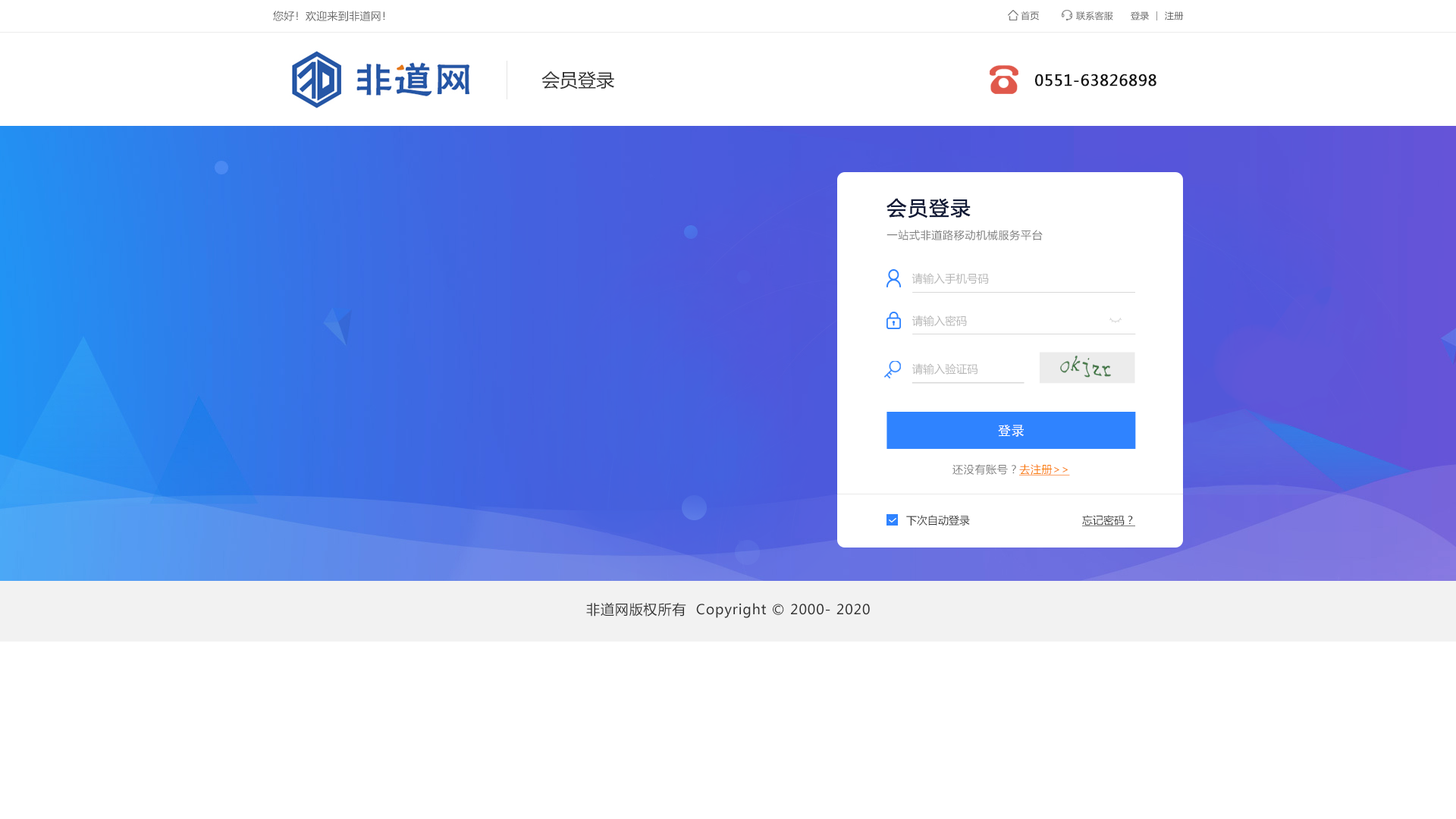
<style>
.page{position:relative;width:1456px;height:819px;background:#ffffff}
.page>*{position:absolute;margin:0}
.t1{font:10.6px "MicrosoftYaHei";letter-spacing:0.022em;color:#666666}
.t2{font:9.1px "MicrosoftYaHei";letter-spacing:0.022em;color:#666666}
.t3{font:18.2px "MicrosoftYaHei";color:#333333}
.t4{font:15.2px "MicrosoftYaHei";letter-spacing:0.022em;color:#121212;font-weight:bold}
.t5{font:19.8px "MicrosoftYaHei";letter-spacing:0.05em;color:#101936;text-transform:uppercase;font-weight:bold}
.t6{font:10.6px "MicrosoftYaHei";letter-spacing:0.05em;color:#7f7f7f}
.t7{font:11px "MicrosoftYaHei";color:#b8b8b8}
.t8{font:13.5px "AdobeHeitiStd-Regular";color:#ffffff}
.t9{font:10.6px "MicrosoftYaHei";letter-spacing:0.05em;color:#f97b03;text-decoration:underline}
.t10{font:10.6px "MicrosoftYaHei";color:#333333}
.t11{font:10.6px "MicrosoftYaHei";color:#333333;text-decoration:underline}
.t12{font:13.6px "MicrosoftYaHei";letter-spacing:0.05em;color:#333333}
</style>
<div class="page">
<p class="t1" style="left:273px;top:11px;width:112px;height:10px">您好！欢迎来到非道网！</p>
<p class="t2" style="left:1021px;top:11px;width:18px;height:9px">首页</p>
<p class="t2" style="left:1076px;top:11px;width:37px;height:9px">联系客服</p>
<p class="t2" style="left:1131px;top:11px;width:18px;height:9px">登录</p>
<p class="t2" style="left:1165px;top:11px;width:19px;height:9px">注册</p>
<p class="t3" style="left:541px;top:71px;width:73px;height:18px">会员登录</p>
<p class="t4" style="left:1035px;top:74px;width:121px;height:12px">0551-63826898</p>
<p class="t5" style="left:886px;top:198px;width:85px;height:20px">会员登录</p>
<p class="t6" style="left:886px;top:230px;width:157px;height:10px">一站式非道路移动机械服务平台</p>
<p class="t7" style="left:912px;top:273px;width:77px;height:11px">请输入手机号码</p>
<p class="t7" style="left:912px;top:315px;width:55px;height:12px">请输入密码</p>
<p class="t7" style="left:912px;top:363px;width:65px;height:12px">请输入验证码</p>
<p class="t8" style="left:998px;top:425px;width:26px;height:12px">登录</p>
<p class="t6" style="left:952px;top:464px;width:118px;height:11px">还没有账号？<span class="t9">去注册&gt;&gt;</span></p>
<p class="t10" style="left:906px;top:515px;width:64px;height:11px">下次自动登录</p>
<p class="t11" style="left:1082px;top:515px;width:53px;height:11px">忘记密码？</p>
<p class="t12" style="left:586px;top:602px;width:284px;height:16px">非道网版权所有  Copyright © 2000- 2020</p>
</div>
